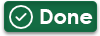
<style>
.page{position:relative;width:100px;height:36px;background:#146c43}
.page>*{position:absolute;margin:0}
.t1{font:20.8px "CenturyGothic-Bold";color:#ffffff}
</style>
<div class="page">
<p class="t1" style="left:40px;top:9px;width:53px;height:15px">Done</p>
</div>
